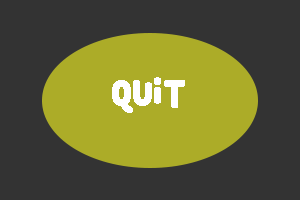
<style>
.page{position:relative;width:300px;height:200px;background:#333333}
.page>*{position:absolute;margin:0}
.t1{font:37.5px "RoundyRainbows";color:#ffffff}
</style>
<div class="page">
<p class="t1" style="left:112px;top:77px;width:73px;height:36px">Quit</p>
</div>
